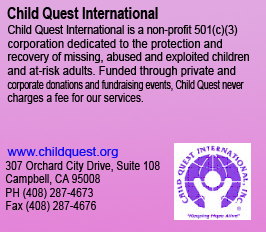
<style>
.page{position:relative;width:266px;height:232px}
.page>*{position:absolute;margin:0}
.t1{font:16.9px "Arial-BoldMT";color:#000000;scale:0.75 1}
.t2{font:12px "ArialMT";color:#000000;scale:0.88 1}
.t3{font:12px "ArialMT";color:#000000;scale:0.94 1}
.t4{font:12px "ArialMT";color:#000000;scale:0.9 1}
.t5{font:12px "ArialMT";color:#000000;scale:0.93 1}
.t6{font:12px "ArialMT";color:#000000;scale:0.71 1}
.t7{font:12px "ArialMT";color:#000000;scale:0.84 1}
.t8{font:12px "ArialMT";color:#0b0bf9;scale:1.07 1}
.t9{font:12px "ArialMT";color:#000000;scale:0.86 1}
</style>
<div class="page">
<p class="t1" style="left:7px;top:7px;width:151px;height:13px">Child Quest International</p>
<p class="t2" style="left:8px;top:25px;width:230px;height:11px">Child Quest International is a non-profit 501(c)(3)</p>
<p class="t3" style="left:8px;top:39px;width:214px;height:11px">corporation dedicated to the protection and</p>
<p class="t4" style="left:8px;top:52px;width:241px;height:11px">recovery of missing, abused and exploited children</p>
<p class="t5" style="left:7px;top:66px;width:229px;height:11px">and at-risk adults. Funded through private and</p>
<p class="t6" style="left:7px;top:80px;width:237px;height:11px">corporate donations and fundraising events, Child Quest never</p>
<p class="t7" style="left:7px;top:93px;width:136px;height:11px">charges a fee for our services.</p>
<p class="t8" style="left:7px;top:147px;width:111px;height:11px">www.childquest.org</p>
<p class="t9" style="left:5px;top:161px;width:155px;height:11px">307 Orchard City Drive, Suite 108</p>
<p class="t9" style="left:5px;top:174px;width:95px;height:11px">Campbell, CA 95008</p>
<p class="t9" style="left:6px;top:188px;width:87px;height:11px">PH (408) 287-4673</p>
<p class="t9" style="left:6px;top:201px;width:90px;height:11px">Fax (408) 287-4676</p>
</div>
